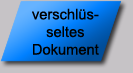
<style>
.page{position:relative;width:133px;height:73px;background:#c6c3c6}
.page>*{position:absolute;margin:0}
.t1{font:14.7px "ArialMT";color:#000000}
</style>
<div class="page">
<p class="t1" style="left:32px;top:8px;width:67px;height:47px;text-align:center">verschlüs-<br>seltes<br>Dokument</p>
</div>
